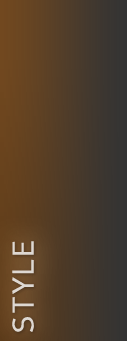
<style>
.page{position:relative;width:127px;height:341px}
.page>*{position:absolute;margin:0}
.t1{font:30px "PerspectiveSans";letter-spacing:0.05em;color:#ded8d2;text-transform:uppercase}
</style>
<div class="page">
<p class="t1" style="left:12px;top:241px;width:22px;height:91px;rotate:-90deg">Style</p>
</div>
